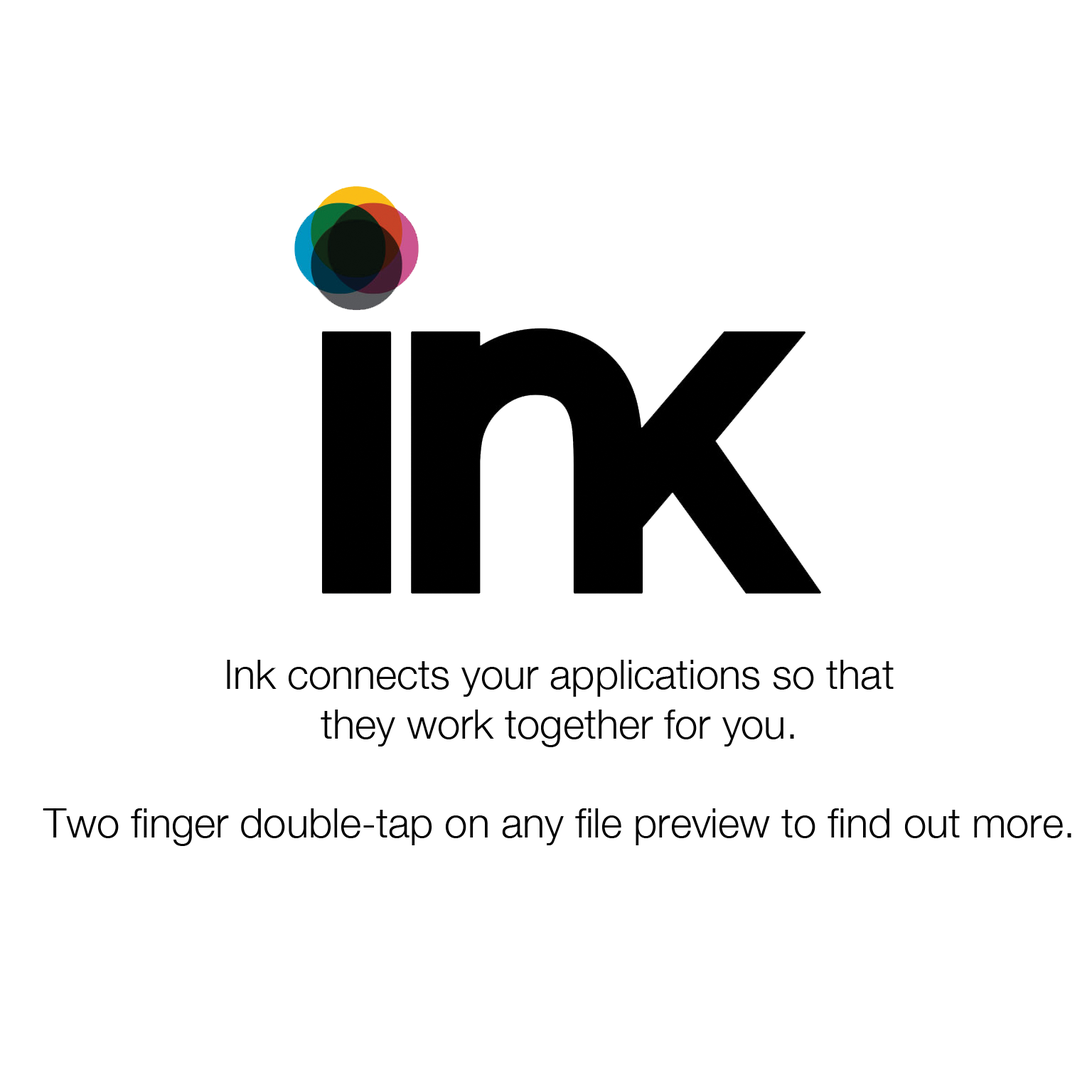
<style>
.page{position:relative;width:1092px;height:1092px;background:#ffffff}
.page>*{position:absolute;margin:0}
.t1{font:41.1px "HelveticaNeue-Light";color:#000000}
</style>
<div class="page">
<p class="t1" style="left:43px;top:660px;width:1028px;height:186px;text-align:center">Ink connects your applications so that<br>they work together for you.<br><br>Two finger double-tap on any file preview to find out more.</p>
</div>
